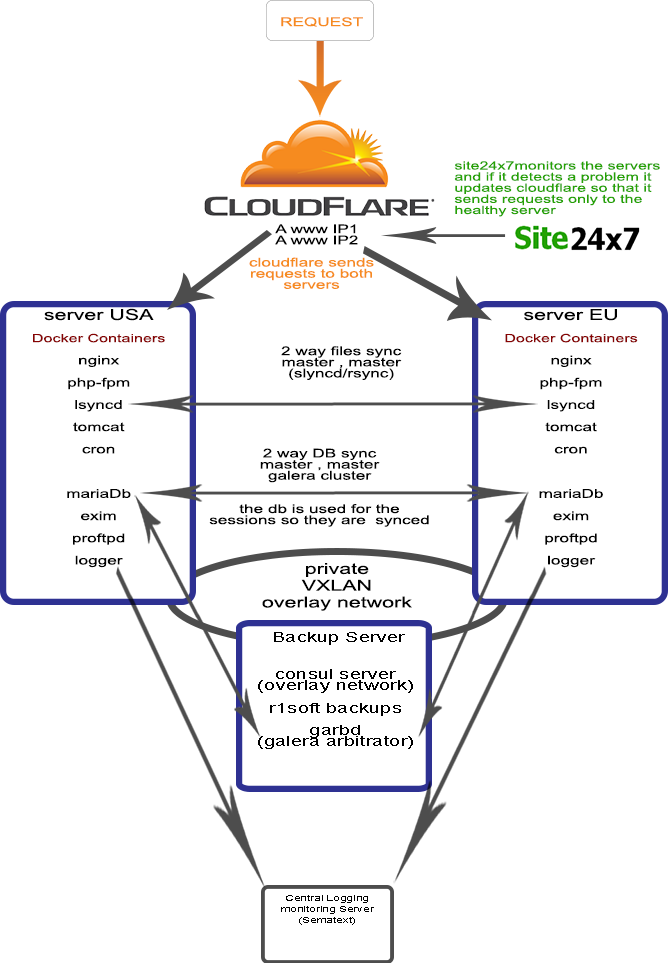
<style>
.page{position:relative;width:668px;height:963px;background:#ffffff}
.page>*{position:absolute;margin:0}
.t1{font:12.1px "ArialMT";color:#f68b1f;scale:1.42 1}
.t2{font:12.1px "ArialMT";color:#000000;scale:1.42 1}
.t3{font:11.4px/11.1px "ArialMT";color:#25a203;scale:1.42 1}
.t4{font:12.1px/11.1px "ArialMT";color:#000000;scale:1.42 1}
.t5{font:12.1px/11.1px "ArialMT";color:#f68b1f;scale:1.42 1}
.t6{font:15.1px/11.1px "ArialMT";color:#000000;scale:1.42 1}
.t7{font:11.4px/11.1px "ArialMT";color:#870303;scale:1.42 1}
.t8{font:15.1px "ArialMT";color:#000000;scale:1.42 1}
.t9{font:14.4px "ArialMT";color:#000000;scale:1.42 1}
.t10{font:14.4px/11.1px "ArialMT";color:#000000;scale:1.42 1}
.t11{font:8.4px/11.1px "ArialMT";color:#000000;scale:1.42 1}
</style>
<div class="page">
<p class="t1" style="left:281px;top:17px;width:82px;height:10px"><span class="t2"><br></span>REQUEST</p>
<p class="t3" style="left:454px;top:161px;width:206px;height:56px">site24x7monitors the servers<br>and if it detects a problem it updates cloudflare so that it sends requests only to the healthy server</p>
<p class="t4" style="left:275px;top:224px;width:83px;height:21px;text-align:center">A www IP1 <br>A www IP2</p>
<p class="t5" style="left:249px;top:257px;width:125px;height:32px;text-align:center">cloudflare sends requests to both servers</p>
<p class="t4" style="left:33px;top:308px;width:132px;height:260px;text-align:center"><span class="t6">server USA<br><br></span><span class="t7">Docker Containers<br></span><br>nginx<br><br>php-fpm<br><br>lsyncd<br><br>tomcat<br><br>cron<br><br><br><br>mariaDb<br><br>exim<br><br>proftpd<br><br>logger</p>
<p class="t4" style="left:505px;top:309px;width:133px;height:259px;text-align:center"><span class="t6">server EU<br><br></span><span class="t7">Docker Containers<br></span><br>nginx<br><br>php-fpm<br><br>lsyncd<br><br>tomcat<br><br>cron<br><br><br><br>mariaDb<br><br>exim<br><br>proftpd<br><br>logger</p>
<p class="t4" style="left:281px;top:346px;width:121px;height:34px;text-align:center">2 way files sync master , master <br>(slyncd/rsync)</p>
<p class="t4" style="left:209px;top:448px;width:220px;height:79px;text-align:center">2 way DB sync <br>master , master <br>galera cluster<br><br><br>the db is used for the <br>sessions so they are  synced</p>
<p class="t8" style="left:262px;top:563px;width:150px;height:48px;text-align:center">private VXLAN <br>overlay network</p>
<p class="t9" style="left:274px;top:632px;width:131px;height:13px">Backup Server</p>
<p class="t10" style="left:258px;top:669px;width:155px;height:80px;text-align:center">consul server<br>(overlay network)<br><br>r1soft backups<br><br>garbd <br>(galera arbitrator)</p>
<p class="t11" style="left:281px;top:895px;width:93px;height:30px;text-align:center">Central Logging<br>monitoring Server<br>(Sematext)</p>
</div>
